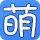
<style>
.page{position:relative;width:40px;height:40px}
.page>*{position:absolute;margin:0}
.t1{font:39px "DFPShaoNvW5";color:#f9fafc}
</style>
<div class="page">
<p class="t1" style="left:3px;top:3px;width:34px;height:35px">萌</p>
</div>
